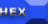
<style>
.page{position:relative;width:48px;height:24px;background:#2850f0}
.page>*{position:absolute;margin:0}
.t1{font:12px "Arial-Black"}
</style>
<div class="page">
<p class="t1" style="left:0px;top:7px;width:27px;height:9px">HEX</p>
</div>
